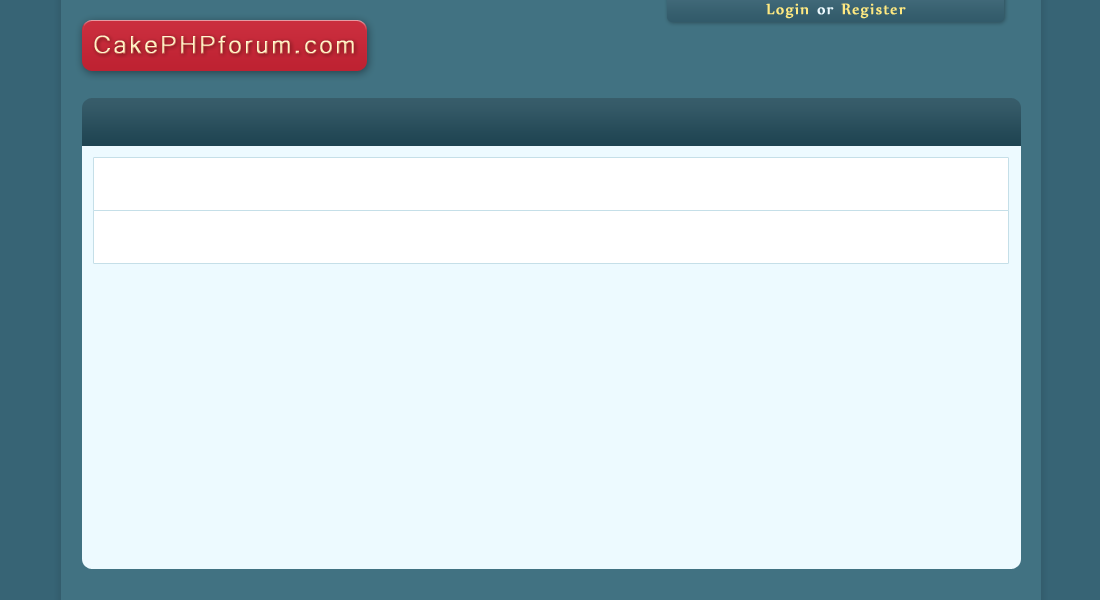
<style>
.page{position:relative;width:1100px;height:600px;background:#edfaff}
.page>*{position:absolute;margin:0}
.t1{font:18px "Nyala-Regular";letter-spacing:0.06em;color:#ffe981;font-weight:bold}
.t2{font:18px "Nyala-Regular";letter-spacing:0.06em;color:#edfaff;font-weight:bold}
.t3{font:32px "Microsoft-Yi-Baiti";letter-spacing:0.06em;font-weight:bold}
</style>
<div class="page">
<p class="t1" style="left:766px;top:3px;width:140px;height:16px">Login <span class="t2">or</span> Register</p>
<p class="t3" style="left:94px;top:35px;width:260px;height:19px">CakePHPforum.com</p>
</div>
